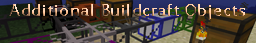
<style>
.page{position:relative;width:256px;height:43px}
.page>*{position:absolute;margin:0}
.t1{font:19px "EstrangeloEdessa";letter-spacing:0.025em}
</style>
<div class="page">
<p class="t1" style="left:9px;top:4px;width:236px;height:16px">Additional Buildcraft Objects</p>
</div>
